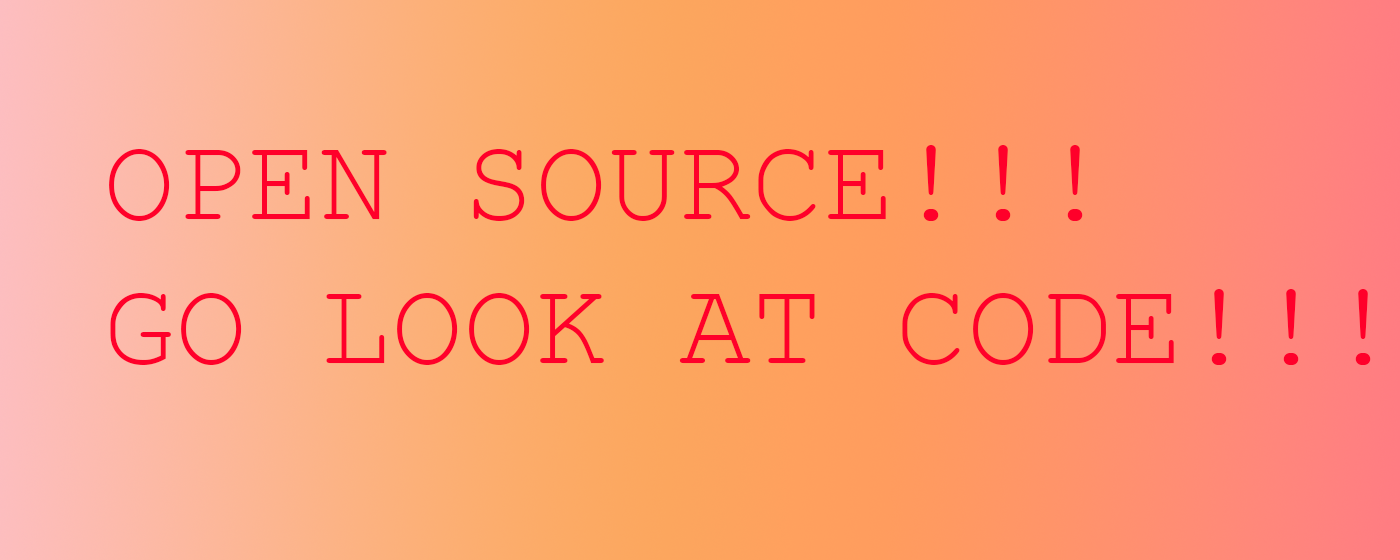
<style>
.page{position:relative;width:1400px;height:560px}
.page>*{position:absolute;margin:0}
.t1{font:120px "CourierNewPSMT";color:#ff002a}
</style>
<div class="page">
<p class="t1" style="left:109px;top:145px;width:1262px;height:220px">OPEN SOURCE!!! <br>GO LOOK AT CODE!!!</p>
</div>
